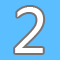
<style>
.page{position:relative;width:60px;height:60px;background:#5bbfff}
.page>*{position:absolute;margin:0}
.t1{font:60px "MicrosoftYaHei";color:#ffffff}
</style>
<div class="page">
<p class="t1" style="left:15px;top:7px;width:29px;height:46px">2</p>
</div>
